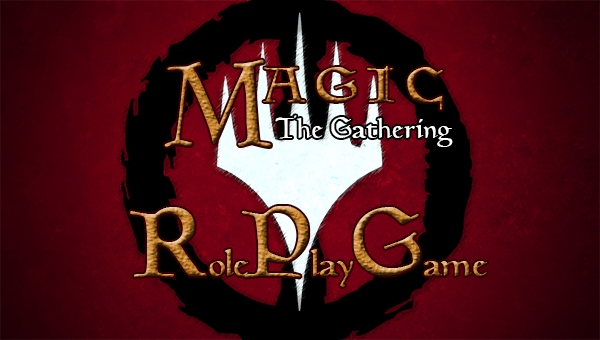
<style>
.page{position:relative;width:600px;height:340px}
.page>*{position:absolute;margin:0}
.t1{font:120px "Magic:theGathering"}
.t2{font:50px "Magic:theGathering";letter-spacing:0.18em;scale:1.2 1}
.t3{font:30px "Magic:theGathering";color:#ffffff}
.t4{font:40px "Magic:theGathering"}
.t5{font:100px "Magic:theGathering"}
</style>
<div class="page">
<p class="t1" style="left:164px;top:59px;width:107px;height:88px">M</p>
<p class="t2" style="left:263px;top:66px;width:180px;height:44px">AGIC</p>
<p class="t3" style="left:275px;top:115px;width:178px;height:32px">The Gathering</p>
<p class="t4" style="left:130px;top:206px;width:358px;height:81px"><span class="t5">R</span>ole<span class="t5">P</span>lay<span class="t5">G</span>ame</p>
</div>
